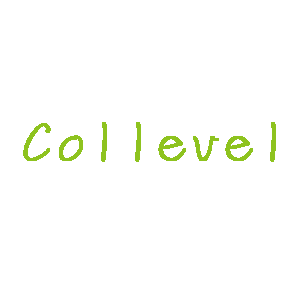
<style>
.page{position:relative;width:299px;height:299px;background:#ffffff}
.page>*{position:absolute;margin:0}
.t1{font:64px "DFYa-W3-WIN-BF";color:#8ec31f;font-weight:bold}
</style>
<div class="page">
<p class="t1" style="left:23px;top:122px;width:253px;height:40px">Collevel</p>
</div>
